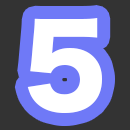
<style>
.page{position:relative;width:130px;height:130px;background:#333333}
.page>*{position:absolute;margin:0}
.t1{font:110.5px "HiraKakuStdN-W8";color:#ffffff}
</style>
<div class="page">
<p class="t1" style="left:27px;top:18px;width:75px;height:96px">５</p>
</div>
